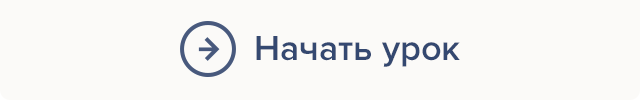
<style>
.page{position:relative;width:640px;height:100px;background:#fbfaf8}
.page>*{position:absolute;margin:0}
.t1{font:36px "ProximaNova-Semibold";color:#344870}
</style>
<div class="page">
<p class="t1" style="left:256px;top:36px;width:204px;height:31px">Начать урок</p>
</div>
